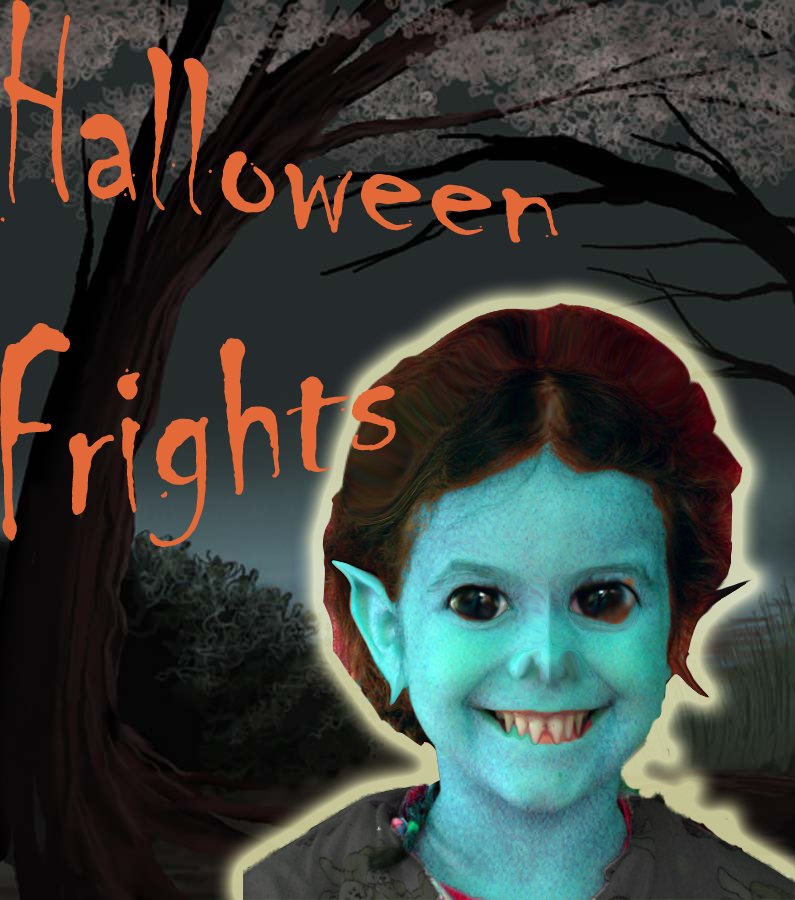
<style>
.page{position:relative;width:795px;height:900px}
.page>*{position:absolute;margin:0}
.t1{font:208.3px "Chiller-Regular";color:#e36a38}
</style>
<div class="page">
<p class="t1" style="left:0px;top:0px;width:558px;height:547px">Halloween<br>Frights</p>
</div>
